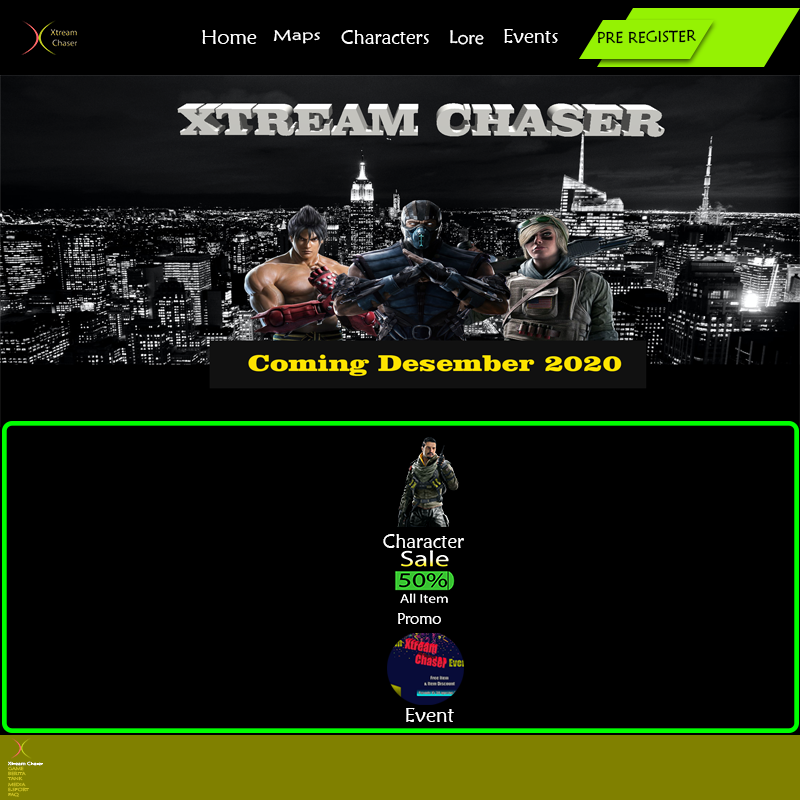
<style>
.page{position:relative;width:800px;height:800px;background:#000000}
.page>*{position:absolute;margin:0}
.t1{font:20.4px "MaiandraGD-Regular";color:#ffffff}
.t2{font:15.1px "MaiandraGD-Regular";color:#ffffff;scale:1.32 1}
.t3{font:19.6px "MaiandraGD-Regular";color:#ffffff}
.t4{font:18.1px "MaiandraGD-Regular";color:#ffffff}
.t5{font:19.9px "MaiandraGD-Regular";color:#ffffff}
.t6{font:15.7px "MaiandraGD-Regular";color:#000000}
.t7{font:19.5px "MaiandraGD-Regular";color:#ffffff}
.t8{font:15.3px "MaiandraGD-Regular";color:#ffffff}
.t9{font:4.3px "MaiandraGD-Regular";color:#c8be24;scale:1.27 1}
.t10{font:4.3px "MaiandraGD-Regular";color:#ffffff;scale:1.27 1}
</style>
<div class="page">
<p class="t1" style="left:202px;top:30px;width:55px;height:14px">Home</p>
<p class="t2" style="left:273px;top:29px;width:47px;height:15px;rotate:-1deg">Maps</p>
<p class="t3" style="left:341px;top:30px;width:88px;height:14px">Characters</p>
<p class="t4" style="left:450px;top:30px;width:34px;height:15px">Lore</p>
<p class="t5" style="left:504px;top:29px;width:54px;height:14px">Events</p>
<p class="t6" style="left:597px;top:29px;width:99px;height:15px;rotate:-1deg">PRE REGISTER</p>
<p class="t7" style="left:383px;top:534px;width:81px;height:14px">Character</p>
<p class="t8" style="left:398px;top:613px;width:43px;height:11px">Promo</p>
<p class="t1" style="left:406px;top:708px;width:48px;height:14px">Event</p>
<p class="t9" style="left:7px;top:761px;width:36px;height:36px"><span class="t10">Xtream Chaser<br></span>GAME<br>BERITA<br>TANK<br>MEDIA<br>E-SPORT<br>FAQ</p>
</div>
